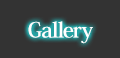
<style>
.page{position:relative;width:120px;height:58px;background:#333333}
.page>*{position:absolute;margin:0}
.t1{font:22px "HeiseiMinStd-W7";letter-spacing:-0.04em;color:#fcfaf6}
</style>
<div class="page">
<p class="t1" style="left:28px;top:21px;width:65px;height:23px">Gallery</p>
</div>
